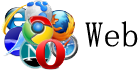
<style>
.page{position:relative;width:139px;height:70px;background:#ffffff}
.page>*{position:absolute;margin:0}
.t1{font:36px "MS-Mincho";color:#000000}
</style>
<div class="page">
<p class="t1" style="left:85px;top:21px;width:53px;height:26px">Web</p>
</div>
